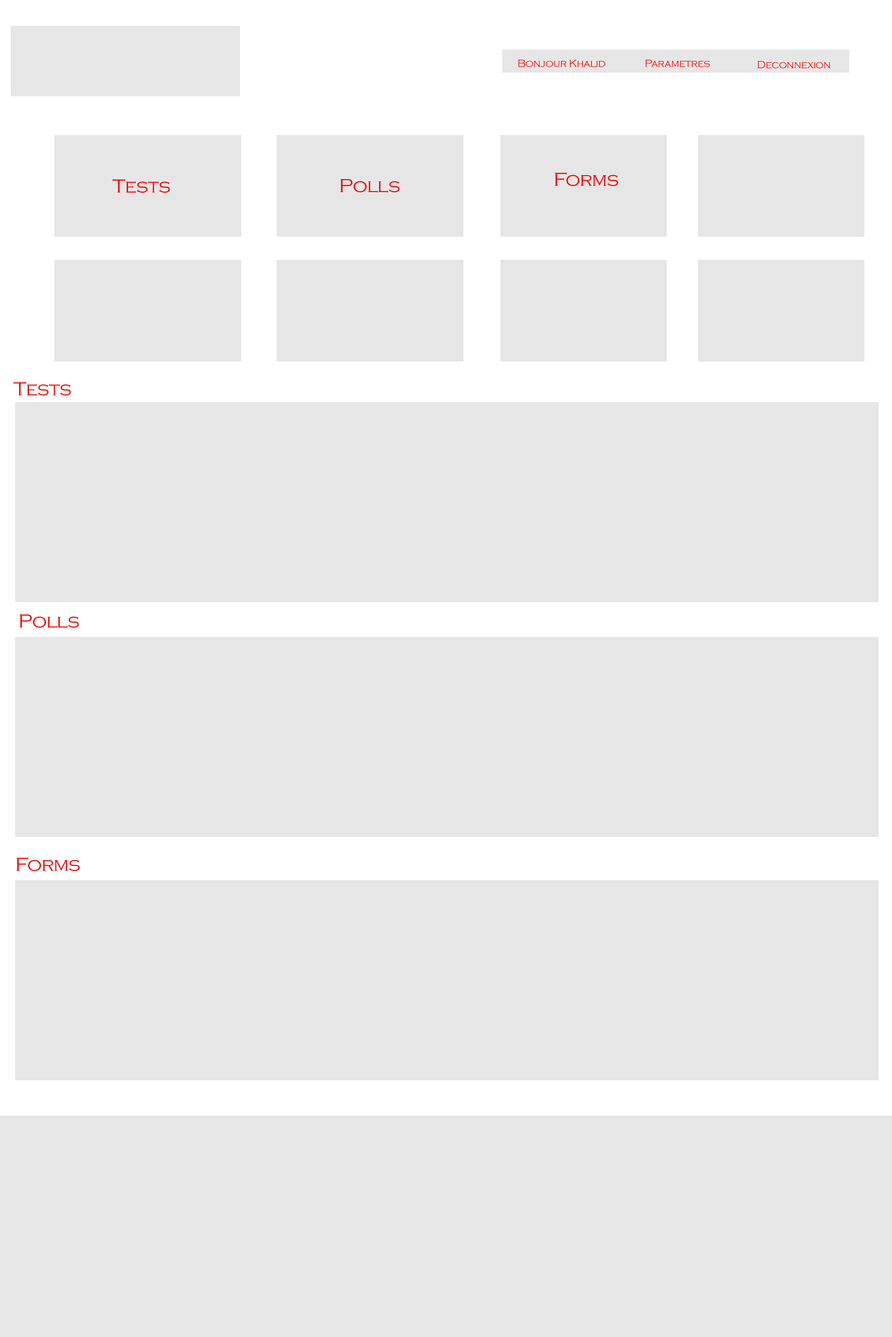
<style>
.page{position:relative;width:892px;height:1337px;background:#e6e6e6}
.page>*{position:absolute;margin:0}
.t1{font:10.7px "CopperplateGothic-Light";letter-spacing:-0.025em;color:#f30000}
.t2{font:19.6px "CopperplateGothic-Light";letter-spacing:-0.025em;color:#f30000}
</style>
<div class="page">
<p class="t1" style="left:518px;top:60px;width:87px;height:7px">Bonjour Khalid</p>
<p class="t1" style="left:645px;top:60px;width:65px;height:7px">Parametres</p>
<p class="t1" style="left:757px;top:61px;width:73px;height:8px">Deconnexion</p>
<p class="t2" style="left:555px;top:172px;width:63px;height:14px">Forms</p>
<p class="t2" style="left:112px;top:179px;width:58px;height:14px">Tests</p>
<p class="t2" style="left:340px;top:179px;width:59px;height:14px">Polls</p>
<p class="t2" style="left:13px;top:382px;width:58px;height:14px">Tests</p>
<p class="t2" style="left:20px;top:614px;width:59px;height:15px">Polls</p>
<p class="t2" style="left:16px;top:857px;width:64px;height:15px">Forms</p>
</div>
